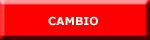
<style>
.page{position:relative;width:150px;height:40px;background:#ff0000}
.page>*{position:absolute;margin:0}
.t1{font:11px "Verdana-Bold";color:#ffffff}
</style>
<div class="page">
<p class="t1" style="left:48px;top:16px;width:50px;height:10px">CAMBIO</p>
</div>
